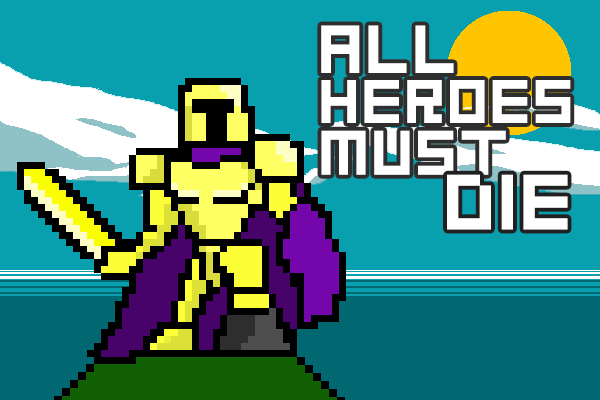
<style>
.page{position:relative;width:600px;height:400px;background:#08a0ae}
.page>*{position:absolute;margin:0}
.t1{font:75.4px "GoodbyeDespair";color:#ffffff}
.t2{font:68.5px "GoodbyeDespair";color:#ffffff}
.t3{font:70px "GoodbyeDespair";color:#ffffff}
.t4{font:87.4px "GoodbyeDespair";color:#ffffff}
</style>
<div class="page">
<p class="t1" style="left:321px;top:25px;width:133px;height:48px">all</p>
<p class="t2" style="left:321px;top:80px;width:250px;height:43px">heroes</p>
<p class="t3" style="left:321px;top:130px;width:185px;height:45px">must</p>
<p class="t4" style="left:447px;top:174px;width:121px;height:56px">die</p>
</div>
